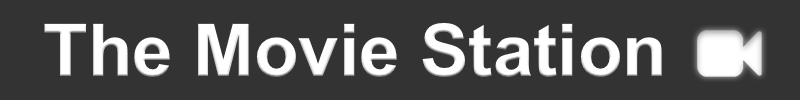
<style>
.page{position:relative;width:800px;height:100px;background:#333333}
.page>*{position:absolute;margin:0}
.t1{font:125px "Arial-BoldMT";color:#ffffff}
</style>
<div class="page">
<p class="t1" style="left:44px;top:22px;width:618px;height:55px">The Movie Station</p>
</div>
